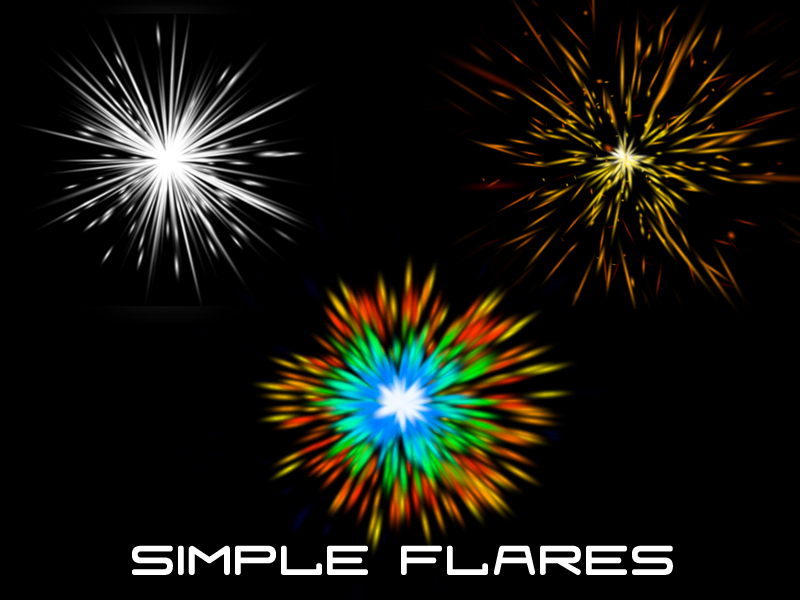
<style>
.page{position:relative;width:800px;height:600px;background:#000000}
.page>*{position:absolute;margin:0}
.t1{font:100px "Fraulein";color:#ffffff}
</style>
<div class="page">
<p class="t1" style="left:132px;top:545px;width:541px;height:30px">simple flares</p>
</div>
